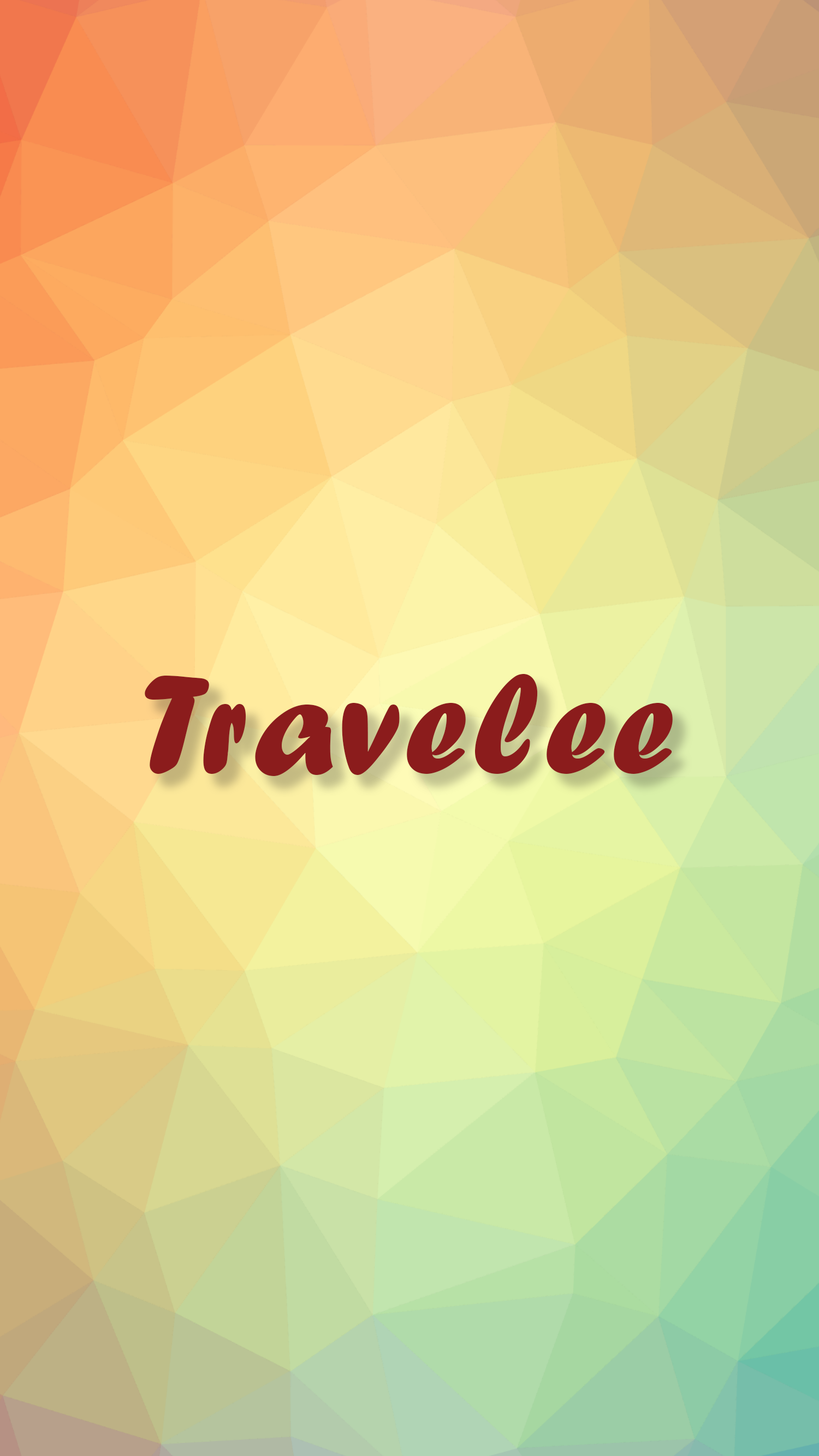
<style>
.page{position:relative;width:819px;height:1456px}
.page>*{position:absolute;margin:0}
.t1{font:147.8px "ForteMT";letter-spacing:0.03em;color:#8b1c1c}
</style>
<div class="page">
<p class="t1" style="left:145px;top:674px;width:527px;height:102px">Travelee</p>
</div>
